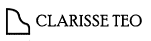
<style>
.page{position:relative;width:151px;height:41px;background:#ffffff}
.page>*{position:absolute;margin:0}
.t1{font:16px "PoorRichard-Regular";letter-spacing:0.05em;color:#000000}
</style>
<div class="page">
<p class="t1" style="left:36px;top:14px;width:106px;height:13px">CLARISSE TEO</p>
</div>
